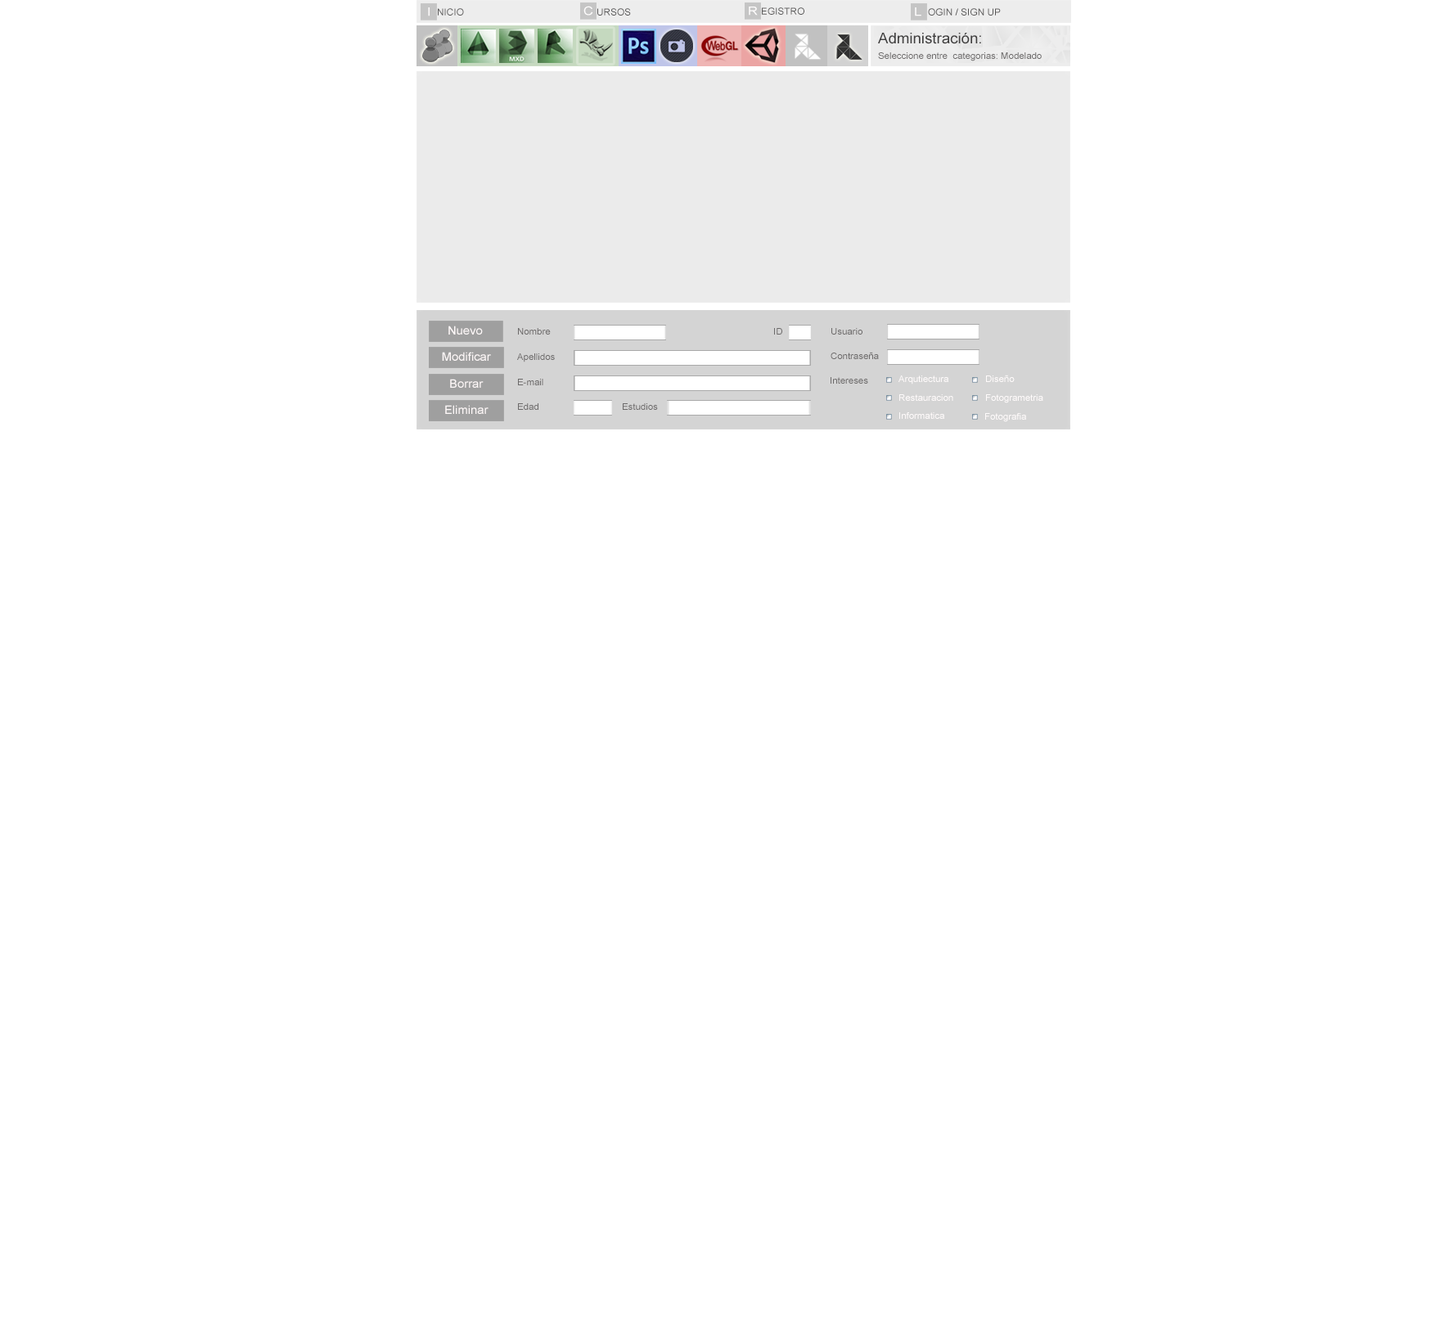
<style>
.page{position:relative;width:1432px;height:1335px;background:#ffffff}
.page>*{position:absolute;margin:0}
.t1{font:11.8px "ArialMT";color:#fffdfd;scale:1.15 1}
.t2{font:9.4px "ArialMT";color:#575656;scale:1.04 1}
.t3{font:14.7px "ArialMT";color:#3f3e3e;scale:1.04 1}
.t4{font:9px "ArialMT";color:#6b6969;scale:1.04 1}
.t5{font:11.6px "ArialMT";color:#fff9f9;scale:1.05 1}
.t6{font:9px "ArialMT";color:#fffbfb;scale:1.04 1}
</style>
<div class="page">
<p class="t1" style="left:583px;top:6px;width:10px;height:10px">C</p>
<p class="t1" style="left:428px;top:7px;width:2px;height:9px">I</p>
<p class="t2" style="left:438px;top:8px;width:26px;height:8px">NICIO</p>
<p class="t2" style="left:597px;top:8px;width:34px;height:8px">URSOS</p>
<p class="t1" style="left:749px;top:7px;width:9px;height:9px">R</p>
<p class="t2" style="left:762px;top:7px;width:42px;height:8px">EGISTRO</p>
<p class="t1" style="left:915px;top:7px;width:6px;height:9px">L</p>
<p class="t2" style="left:928px;top:8px;width:73px;height:8px">OGIN / SIGN UP</p>
<p class="t3" style="left:878px;top:33px;width:103px;height:11px">Administración:</p>
<p class="t4" style="left:878px;top:52px;width:164px;height:9px">Seleccione entre  categorias: Modelado</p>
<p class="t5" style="left:448px;top:326px;width:35px;height:9px">Nuevo</p>
<p class="t4" style="left:518px;top:328px;width:33px;height:7px">Nombre</p>
<p class="t4" style="left:774px;top:328px;width:8px;height:7px">ID</p>
<p class="t4" style="left:831px;top:328px;width:31px;height:7px">Usuario</p>
<p class="t5" style="left:442px;top:352px;width:49px;height:9px">Modificar</p>
<p class="t4" style="left:517px;top:353px;width:38px;height:9px">Apellidos</p>
<p class="t4" style="left:830px;top:352px;width:49px;height:7px">Contraseña</p>
<p class="t4" style="left:830px;top:377px;width:38px;height:7px">Intereses</p>
<p class="t6" style="left:898px;top:376px;width:50px;height:9px">Arqutiectura</p>
<p class="t6" style="left:986px;top:375px;width:29px;height:7px">Diseño</p>
<p class="t5" style="left:450px;top:379px;width:34px;height:9px">Borrar</p>
<p class="t4" style="left:518px;top:379px;width:25px;height:6px">E-mail</p>
<p class="t6" style="left:899px;top:394px;width:54px;height:7px">Restauracion</p>
<p class="t6" style="left:986px;top:394px;width:57px;height:9px">Fotogrametria</p>
<p class="t5" style="left:445px;top:405px;width:43px;height:9px">Eliminar</p>
<p class="t4" style="left:518px;top:403px;width:20px;height:7px">Edad</p>
<p class="t4" style="left:623px;top:403px;width:35px;height:7px">Estudios</p>
<p class="t6" style="left:899px;top:412px;width:45px;height:7px">Informatica</p>
<p class="t6" style="left:985px;top:413px;width:41px;height:9px">Fotografia</p>
</div>
